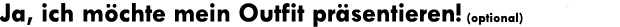
<style>
.page{position:relative;width:620px;height:27px;background:#ffffff}
.page>*{position:absolute;margin:0}
.t1{font:28px "TwCenMT-Bold";color:#000000}
.t2{font:14px "TwCenMT-Bold";color:#000000}
</style>
<div class="page">
<p class="t1" style="left:0px;top:3px;width:461px;height:24px">Ja, ich möchte mein Outfit präsentieren!</p>
<p class="t2" style="left:467px;top:12px;width:56px;height:13px">(optional)</p>
</div>
